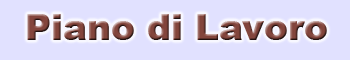
<style>
.page{position:relative;width:350px;height:60px;background:#e1e1ff}
.page>*{position:absolute;margin:0}
.t1{font:36px "Arial-Black"}
</style>
<div class="page">
<p class="t1" style="left:27px;top:14px;width:300px;height:26px">Piano di Lavoro</p>
</div>
